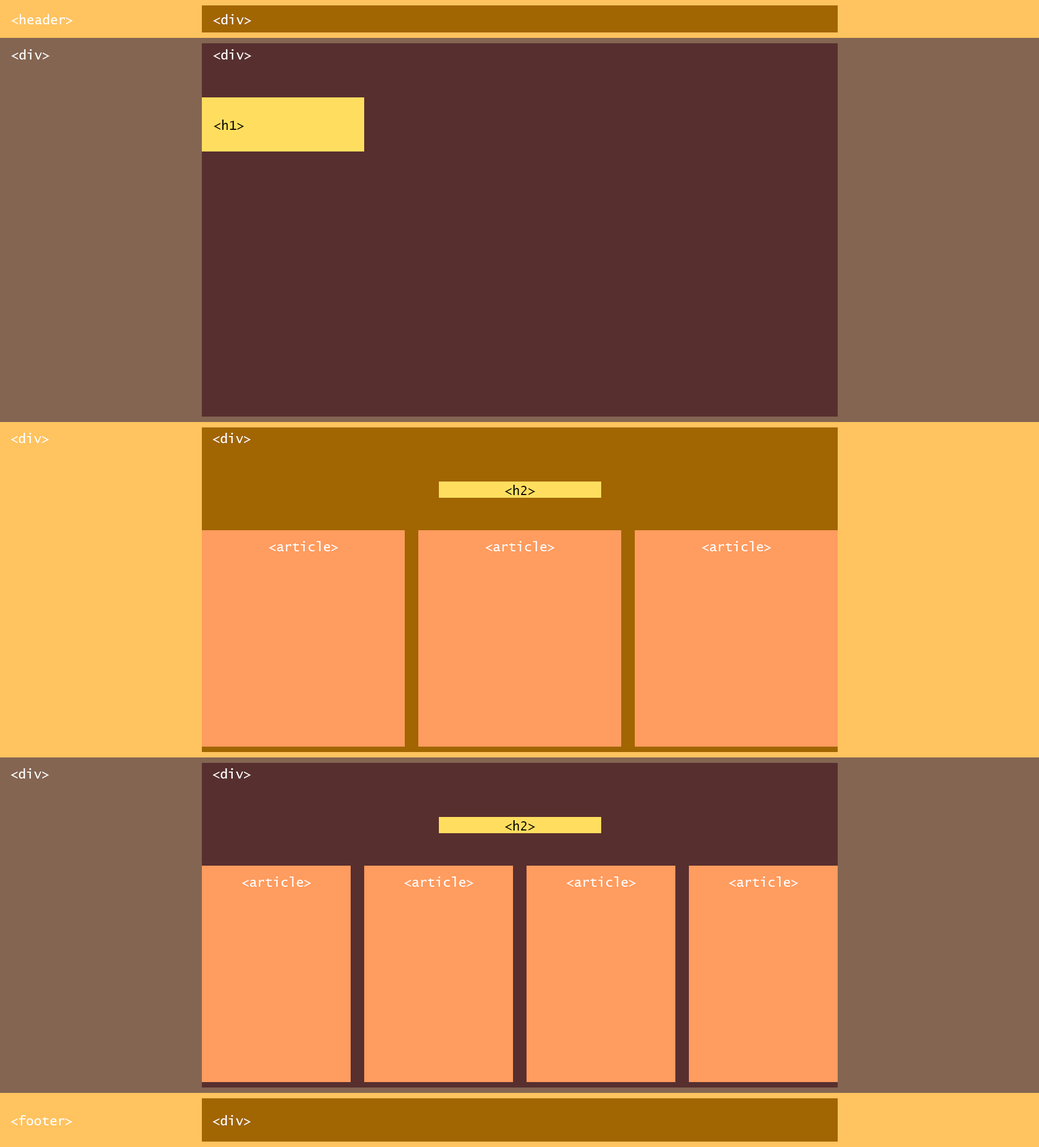
<style>
.page{position:relative;width:1039px;height:1147px;background:#846552}
.page>*{position:absolute;margin:0}
.t1{font:13px "LucidaConsole";color:#ffffff}
.t2{font:13px "LucidaConsole";color:#000000}
</style>
<div class="page">
<p class="t1" style="left:11px;top:14px;width:62px;height:10px">&lt;header&gt;</p>
<p class="t1" style="left:213px;top:14px;width:39px;height:10px">&lt;div&gt;</p>
<p class="t1" style="left:11px;top:49px;width:39px;height:11px">&lt;div&gt;</p>
<p class="t1" style="left:213px;top:49px;width:39px;height:11px">&lt;div&gt;</p>
<p class="t2" style="left:214px;top:120px;width:30px;height:10px">&lt;h1&gt;</p>
<p class="t1" style="left:11px;top:433px;width:38px;height:10px">&lt;div&gt;</p>
<p class="t1" style="left:213px;top:433px;width:38px;height:10px">&lt;div&gt;</p>
<p class="t2" style="left:505px;top:485px;width:30px;height:10px">&lt;h2&gt;</p>
<p class="t1" style="left:269px;top:541px;width:69px;height:11px">&lt;article&gt;</p>
<p class="t1" style="left:486px;top:541px;width:69px;height:11px">&lt;article&gt;</p>
<p class="t1" style="left:702px;top:541px;width:69px;height:11px">&lt;article&gt;</p>
<p class="t1" style="left:11px;top:769px;width:38px;height:10px">&lt;div&gt;</p>
<p class="t1" style="left:213px;top:769px;width:38px;height:10px">&lt;div&gt;</p>
<p class="t2" style="left:505px;top:821px;width:30px;height:10px">&lt;h2&gt;</p>
<p class="t1" style="left:242px;top:877px;width:69px;height:10px">&lt;article&gt;</p>
<p class="t1" style="left:404px;top:877px;width:70px;height:10px">&lt;article&gt;</p>
<p class="t1" style="left:567px;top:877px;width:69px;height:10px">&lt;article&gt;</p>
<p class="t1" style="left:729px;top:877px;width:69px;height:10px">&lt;article&gt;</p>
<p class="t1" style="left:11px;top:1116px;width:62px;height:10px">&lt;footer&gt;</p>
<p class="t1" style="left:213px;top:1116px;width:38px;height:10px">&lt;div&gt;</p>
</div>
